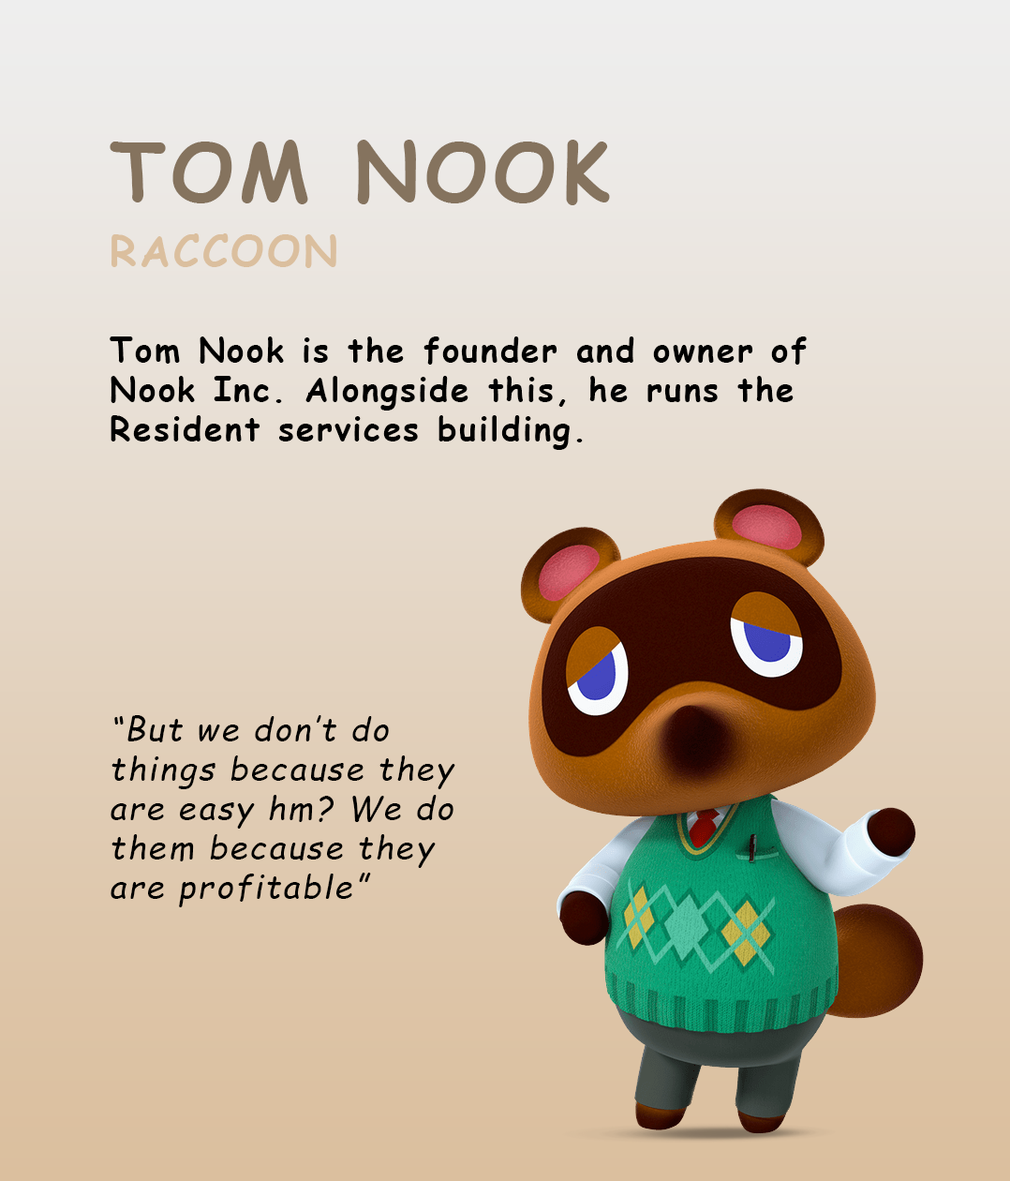
<style>
.page{position:relative;width:1010px;height:1181px}
.page>*{position:absolute;margin:0}
.t1{font:79.6px/65.6px "ComicSansMS-Bold";letter-spacing:0.065em;color:#85735e}
.t2{font:42.2px/65.6px "ComicSansMS-Bold";letter-spacing:0.065em;color:#dbbf9e}
.t3{font:32.8px "ComicSansMS-Bold";letter-spacing:0.065em;color:#000000}
.t4{font:32.8px "ComicSansMS-Italic";letter-spacing:0.065em;color:#000000}
</style>
<div class="page">
<p class="t1" style="left:110px;top:140px;width:500px;height:128px">TOM NOOK<br><span class="t2">RACCOON</span></p>
<p class="t3" style="left:110px;top:336px;width:697px;height:114px">Tom Nook is the founder and owner of Nook Inc. Alongside this, he runs the Resident services building.</p>
<p class="t4" style="left:111px;top:715px;width:344px;height:192px">“But we don’t do things because they are easy hm? We do them because they are profitable”</p>
</div>
